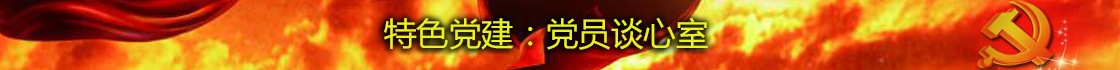
<style>
.page{position:relative;width:1120px;height:70px}
.page>*{position:absolute;margin:0}
.t1{font:32.4px "MicrosoftYaHei";color:#ebf316}
</style>
<div class="page">
<p class="t1" style="left:384px;top:17px;width:324px;height:33px">特色党建：党员谈心室</p>
</div>
